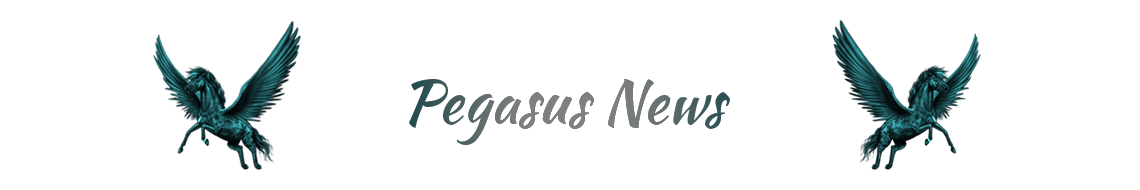
<style>
.page{position:relative;width:1140px;height:190px;background:#ffffff}
.page>*{position:absolute;margin:0}
.t1{font:60px "KaushanScript-Regular"}
</style>
<div class="page">
<p class="t1" style="left:409px;top:79px;width:321px;height:66px">Pegasus News</p>
<p class="t1" style="left:409px;top:79px;width:321px;height:66px">Pegasus News</p>
</div>
